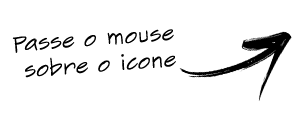
<style>
.page{position:relative;width:300px;height:120px;background:#ffffff}
.page>*{position:absolute;margin:0}
.t1{font:22px "SketchFlowPrint";color:#000000}
</style>
<div class="page">
<p class="t1" style="left:12px;top:29px;width:164px;height:49px;text-align:center;rotate:-4deg">Passe o mouse <br>sobre o icone</p>
</div>
